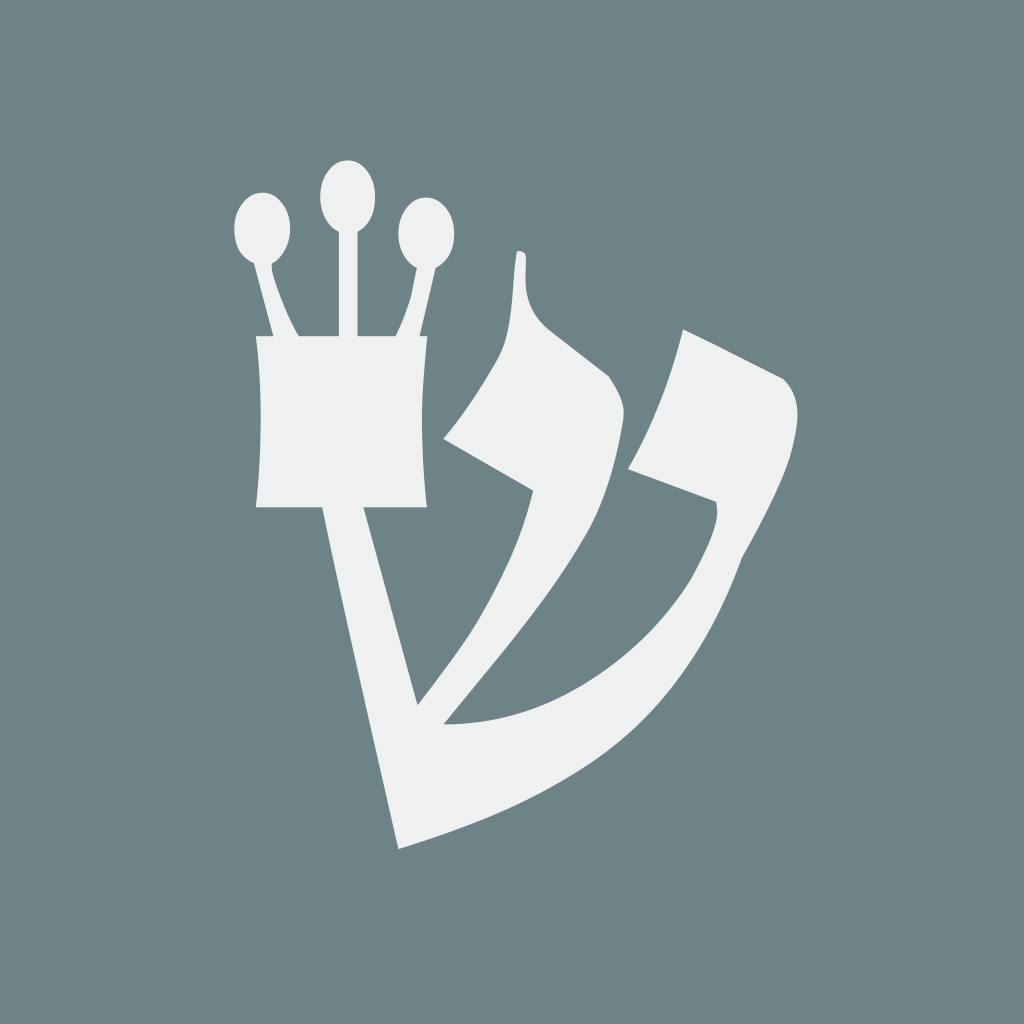
<style>
.page{position:relative;width:1024px;height:1024px;background:#6e8387}
.page>*{position:absolute;margin:0}
.t1{font:1000px "StamAshkenazCLM";color:#eff1f1}
</style>
<div class="page">
<p class="t1" style="left:234px;top:160px;width:564px;height:689px">ש</p>
</div>
